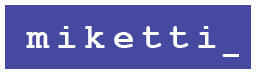
<style>
.page{position:relative;width:256px;height:74px;background:#4549a0}
.page>*{position:absolute;margin:0}
.t1{font:36px "CourierNewPS-BoldMT";letter-spacing:0.2em;color:#ffffff}
</style>
<div class="page">
<p class="t1" style="left:26px;top:26px;width:190px;height:22px">miketti</p>
</div>
